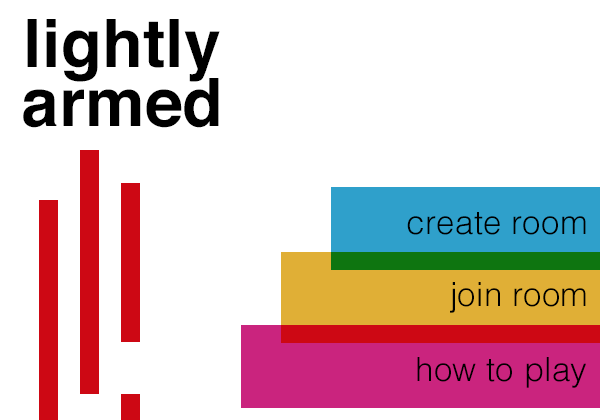
<style>
.page{position:relative;width:600px;height:420px;background:#ffffff}
.page>*{position:absolute;margin:0}
.t1{font:66.7px "Helvetica-Bold";letter-spacing:0.005em;color:#000000}
.t2{font:33.3px "Helvetica-Light";letter-spacing:0.005em;color:#000000}
</style>
<div class="page">
<p class="t1" style="left:27px;top:19px;width:193px;height:63px">lightly</p>
<p class="t1" style="left:23px;top:78px;width:196px;height:50px">armed</p>
<p class="t2" style="left:407px;top:212px;width:179px;height:23px">create room</p>
<p class="t2" style="left:450px;top:282px;width:136px;height:31px">join room</p>
<p class="t2" style="left:417px;top:357px;width:169px;height:31px">how to play</p>
</div>
